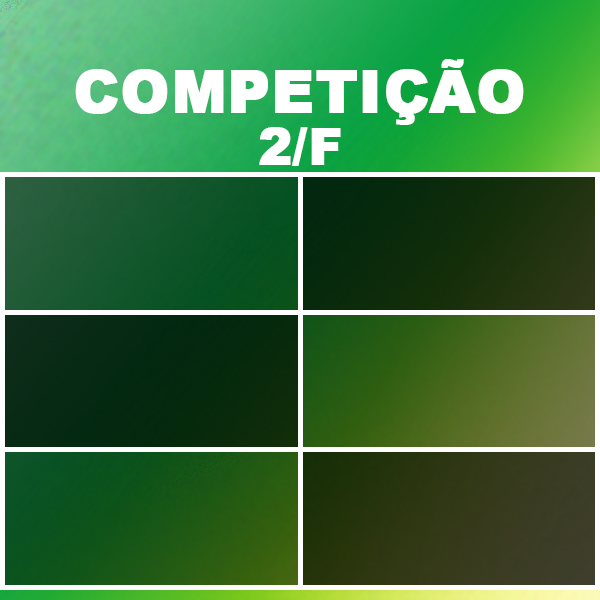
<style>
.page{position:relative;width:600px;height:600px}
.page>*{position:absolute;margin:0}
.t1{font:58.3px "Arial-Black";color:#ffffff;text-transform:uppercase;font-weight:bold}
.t2{font:50px "Arial-Black";color:#ffffff;text-transform:uppercase;font-weight:bold}
</style>
<div class="page">
<p class="t1" style="left:75px;top:59px;width:449px;height:66px">Competição</p>
<p class="t2" style="left:259px;top:127px;width:82px;height:39px">2/f</p>
</div>
